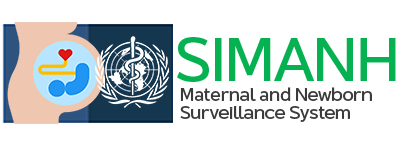
<style>
.page{position:relative;width:400px;height:150px;background:#ffffff}
.page>*{position:absolute;margin:0}
.t1{font:64.9px "PSUStidti-Regular";letter-spacing:-0.025em;color:#06b152}
.t2{font:19.1px/18.8px "PSUStidti-Regular";letter-spacing:-0.025em;color:#3b3b3b}
</style>
<div class="page">
<p class="t1" style="left:177px;top:37px;width:219px;height:45px">SIMANH</p>
<p class="t2" style="left:180px;top:87px;width:192px;height:35px">Maternal and Newborn <br>Surveillance System</p>
</div>
